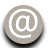
<style>
.page{position:relative;width:48px;height:48px;background:#ffffff}
.page>*{position:absolute;margin:0}
.t1{font:36px "MicrosoftNewTaiLue";letter-spacing:-0.06em;color:#ffffff}
</style>
<div class="page">
<p class="t1" style="left:9px;top:8px;width:29px;height:30px">@</p>
</div>
